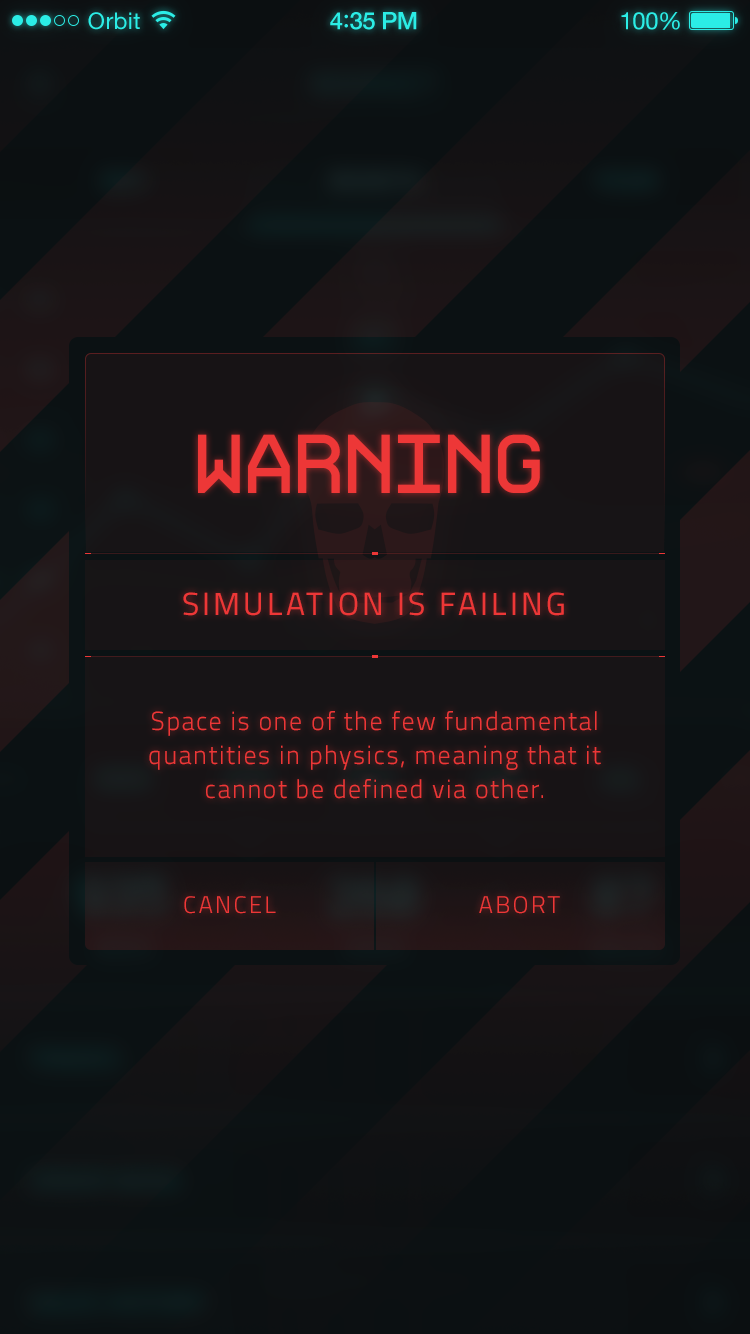
<style>
.page{position:relative;width:750px;height:1334px}
.page>*{position:absolute;margin:0}
.t1{font:23px "HelveticaNeue";letter-spacing:0.02em;color:#2bede6}
.t2{font:24px "HelveticaNeue-Medium";letter-spacing:-0.02em;color:#2bede6}
.t3{font:26px "Avenir-Medium";letter-spacing:-0.02em;color:#2bede6}
.t4{font:24px "HelveticaNeue";letter-spacing:-0.02em;color:#2bede6}
.t5{font:100px "ProFontWindows";color:#ed3737;text-transform:uppercase}
.t6{font:32px "Titillium-Regular";letter-spacing:0.1em;color:#ed3737;text-transform:uppercase}
.t7{font:26px/34px "Titillium-Light";letter-spacing:0.06em;color:#ed3737}
.t8{font:24px "Titillium-Light";letter-spacing:0.1em;color:#ed3737;text-transform:uppercase}
</style>
<div class="page">
<p class="t1" style="left:88px;top:12px;width:52px;height:18px">Orbit</p>
<p class="t2" style="left:330px;top:12px;width:87px;height:18px">4<span class="t3">:</span>35 PM</p>
<p class="t4" style="left:621px;top:12px;width:59px;height:18px">100%</p>
<p class="t5" style="left:198px;top:434px;width:342px;height:59px">WARNING</p>
<p class="t6" style="left:183px;top:592px;width:381px;height:24px">SIMULATION IS FAILING</p>
<p class="t7" style="left:149px;top:711px;width:452px;height:88px;text-align:center">Space is one of the few fundamental quantities in physics, meaning that it cannot be defined via other.</p>
<p class="t8" style="left:184px;top:896px;width:92px;height:18px">Cancel</p>
<p class="t8" style="left:479px;top:896px;width:81px;height:18px">ABORT</p>
</div>
